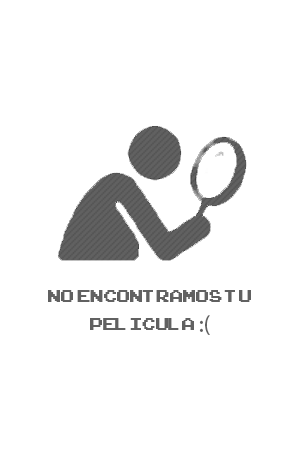
<style>
.page{position:relative;width:300px;height:450px;background:#ffffff}
.page>*{position:absolute;margin:0}
.t1{font:24px "ArcadeClassic";color:#616161}
.t2{font:24px "MyriadPro-Regular";color:#616161}
</style>
<div class="page">
<p class="t1" style="left:48px;top:290px;width:203px;height:45px;text-align:center">No encontramos tu pelicula <span class="t2">:(</span></p>
</div>
